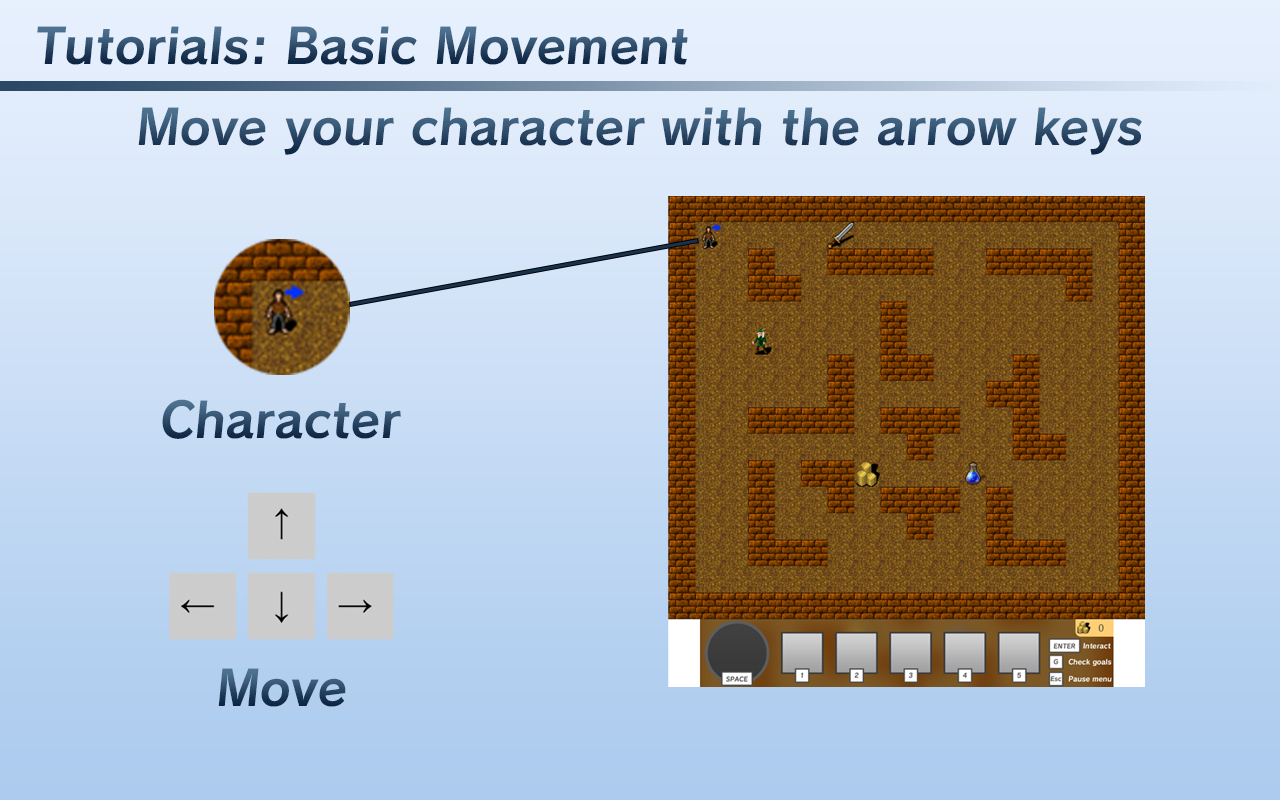
<style>
.page{position:relative;width:1280px;height:800px}
.page>*{position:absolute;margin:0}
.t1{font:48px "Calamity-Bold"}
</style>
<div class="page">
<p class="t1" style="left:37px;top:26px;width:651px;height:39px">Tutorials: Basic Movement</p>
<p class="t1" style="left:138px;top:107px;width:1004px;height:48px">Move your character with the arrow keys</p>
<p class="t1" style="left:162px;top:399px;width:239px;height:40px">Character</p>
<p class="t1" style="left:218px;top:668px;width:128px;height:39px">Move</p>
</div>
